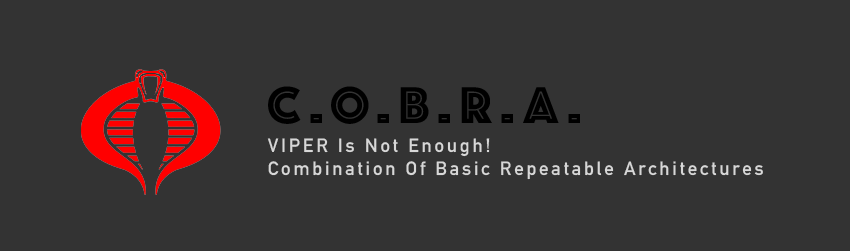
<style>
.page{position:relative;width:850px;height:251px;background:#333333}
.page>*{position:absolute;margin:0}
.t1{font:53.6px "Phosphate-Inline";letter-spacing:0.15em;color:#000000}
.t2{font:18.9px "DINAlternate-Bold";letter-spacing:0.15em;color:#d7d7d7}
</style>
<div class="page">
<p class="t1" style="left:268px;top:86px;width:312px;height:38px">C.O.B.R.A.</p>
<p class="t2" style="left:267px;top:138px;width:496px;height:42px">VIPER Is Not Enough!<br>Combination Of Basic Repeatable Architectures</p>
</div>
